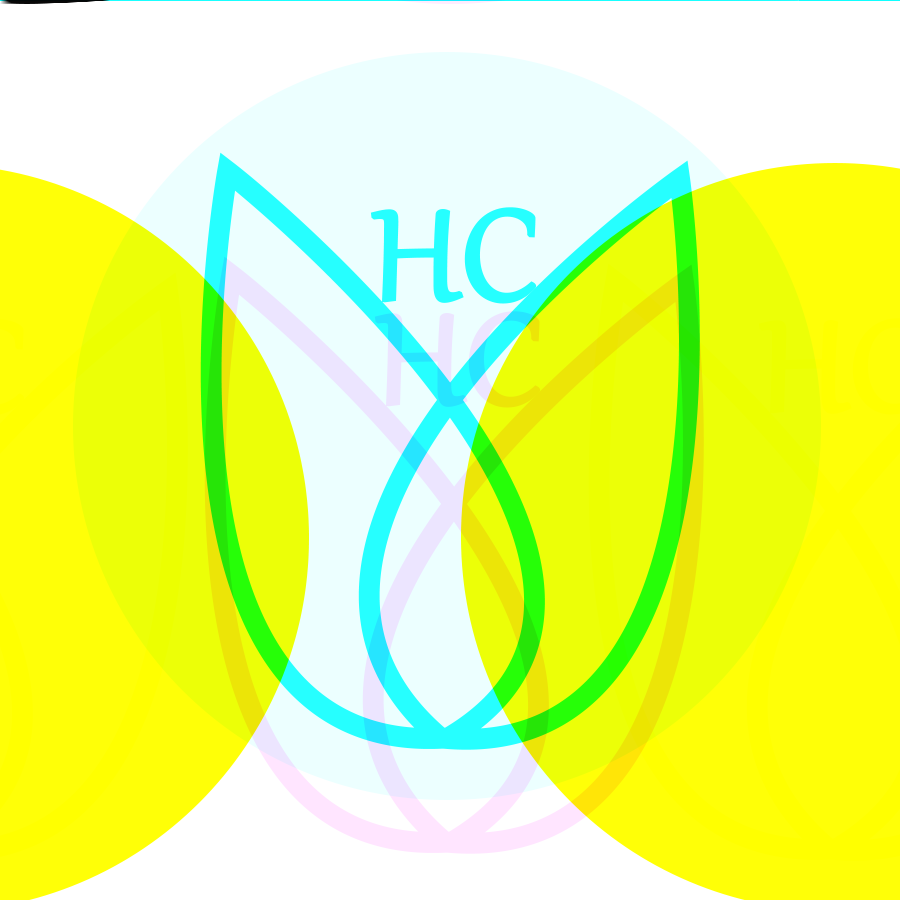
<style>
.page{position:relative;width:900px;height:900px;background:#ffff07}
.page>*{position:absolute;margin:0}
.t1{font:156.3px "Gabriola";color:#26ffff;font-weight:bold}
</style>
<div class="page">
<p class="t1" style="left:370px;top:206px;width:167px;height:97px">HC</p>
</div>
